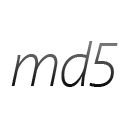
<style>
.page{position:relative;width:128px;height:128px;background:#ffffff}
.page>*{position:absolute;margin:0}
.t1{font:61px "SegoeUI-LightItalic";letter-spacing:-0.025em}
</style>
<div class="page">
<p class="t1" style="left:11px;top:41px;width:107px;height:46px">md5</p>
</div>
